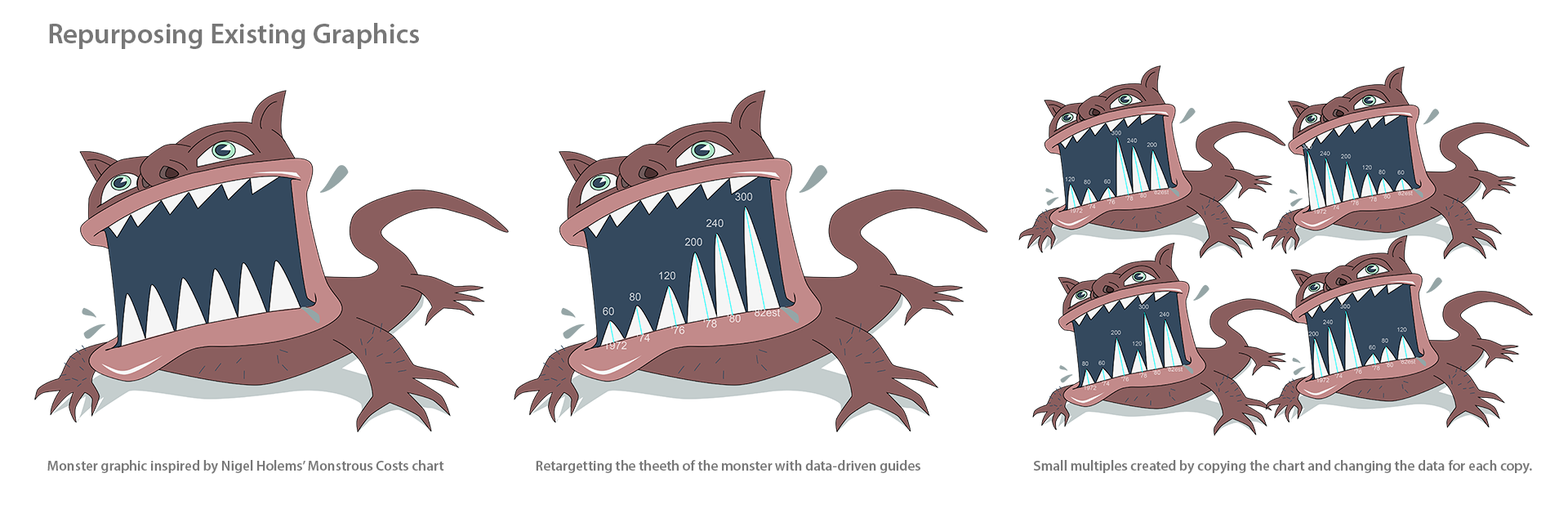
<style>
.page{position:relative;width:1568px;height:509px;background:#ffffff}
.page>*{position:absolute;margin:0}
.t1{font:28.3px "MyriadPro-Semibold";color:#777777}
.t2{font:14.1px "MyriadPro-Semibold";color:#777777}
</style>
<div class="page">
<p class="t1" style="left:49px;top:23px;width:370px;height:26px">Repurposing Existing Graphics</p>
<p class="t2" style="left:47px;top:460px;width:397px;height:14px">Monster graphic inspired by Nigel Holems’ Monstrous Costs chart</p>
<p class="t2" style="left:536px;top:460px;width:384px;height:13px">Retargetting the theeth of the monster with data-driven guides</p>
<p class="t2" style="left:1033px;top:460px;width:499px;height:14px">Small multiples created by copying the chart and changing the data for each copy.</p>
</div>
